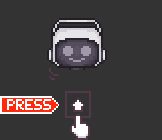
<style>
.page{position:relative;width:162px;height:140px;background:#333333}
.page>*{position:absolute;margin:0}
.t1{font:12.5px "pixelmix";letter-spacing:-0.025em;color:#ffffff}
</style>
<div class="page">
<p class="t1" style="left:7px;top:99px;width:44px;height:11px">PRESS</p>
</div>
